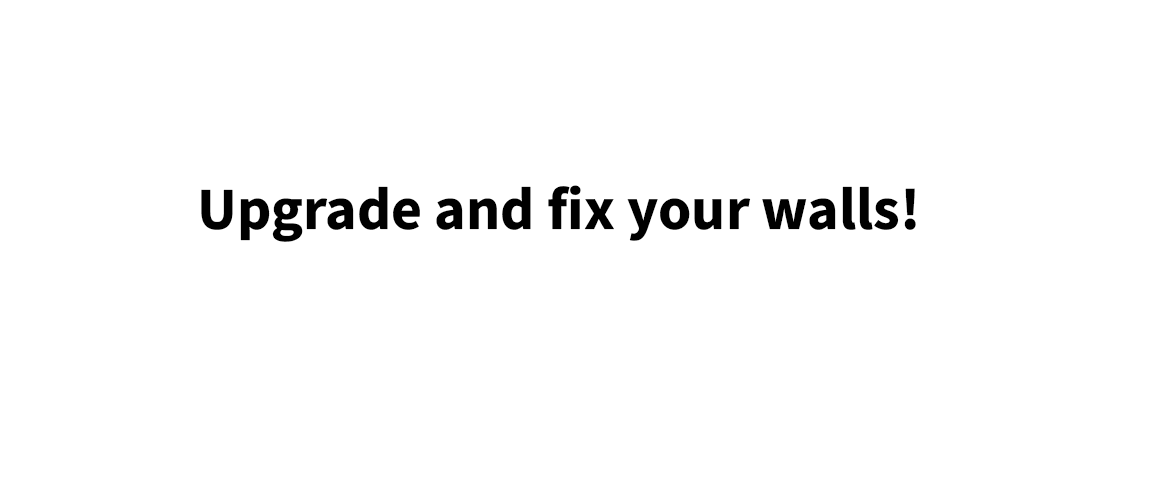
<style>
.page{position:relative;width:1154px;height:492px;background:#ffffff}
.page>*{position:absolute;margin:0}
.t1{font:60px "SourceSansRoman-Bold";color:#000000}
</style>
<div class="page">
<p class="t1" style="left:201px;top:185px;width:715px;height:57px">Upgrade and fix your walls!</p>
</div>
